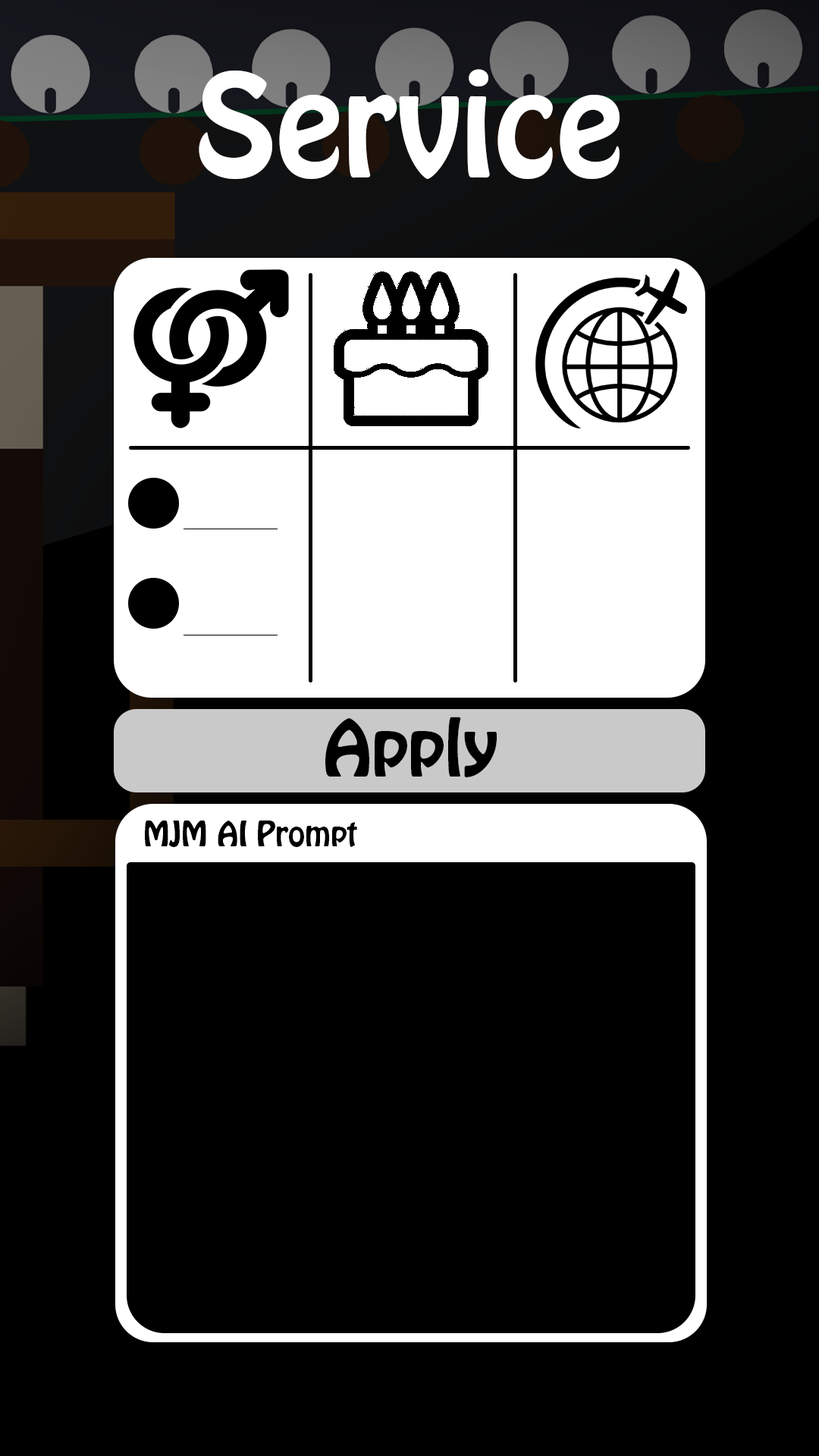
<style>
.page{position:relative;width:819px;height:1456px;background:#000000}
.page>*{position:absolute;margin:0}
.t1{font:126.6px "HoboStd";color:#ffffff}
.t2{font:69.5px "HoboStd";color:#000000}
.t3{font:30.3px "HoboStd";color:#000000}
</style>
<div class="page">
<p class="t1" style="left:199px;top:69px;width:421px;height:111px">Service</p>
<p class="t2" style="left:325px;top:717px;width:172px;height:60px">Apply</p>
<p class="t3" style="left:145px;top:821px;width:212px;height:26px">MJM AI Prompt</p>
</div>
